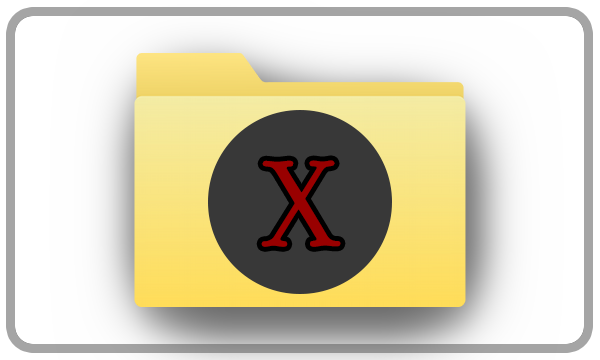
<style>
.page{position:relative;width:600px;height:360px}
.page>*{position:absolute;margin:0}
.t1{font:120px "PoorRichard-Regular";color:#990000}
</style>
<div class="page">
<p class="t1" style="left:261px;top:160px;width:80px;height:87px">X</p>
</div>
